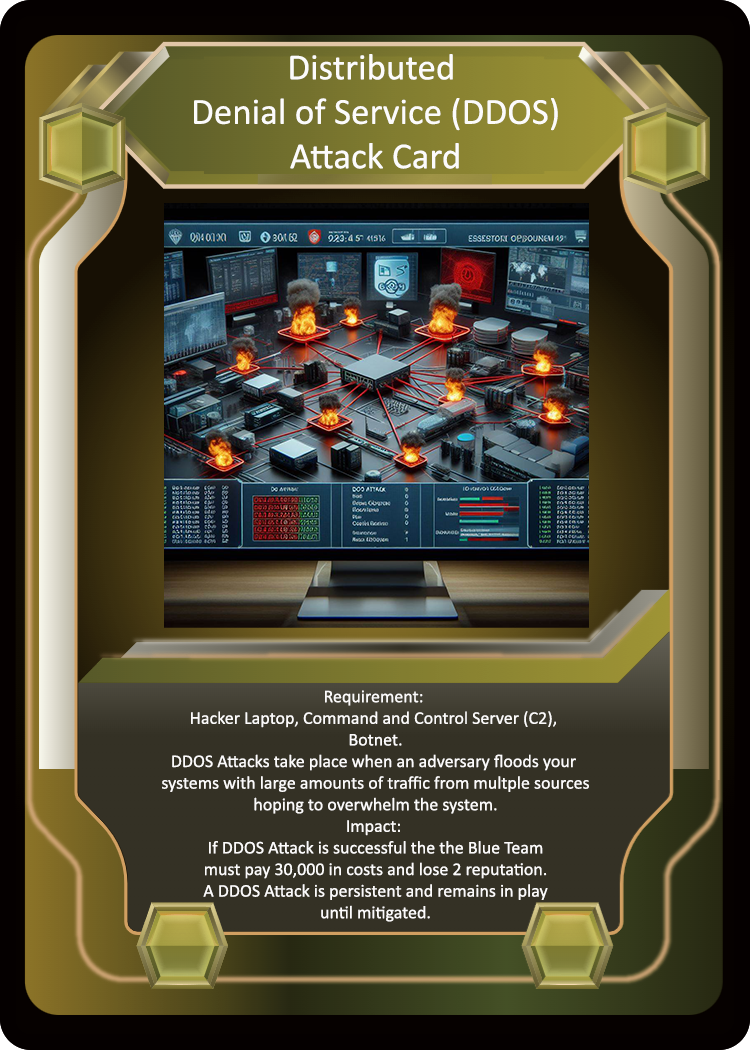
<style>
.page{position:relative;width:750px;height:1050px}
.page>*{position:absolute;margin:0}
.t1{font:37px "Calibri";color:#fcfbfb}
.t2{font:18px "Calibri";color:#fcfbfb}
</style>
<div class="page">
<p class="t1" style="left:194px;top:54px;width:364px;height:115px;text-align:center">Distributed <br>Denial of Service (DDOS)<br>Attack Card</p>
<p class="t2" style="left:162px;top:690px;width:427px;height:232px;text-align:center">Requirement: <br>Hacker Laptop, Command and Control Server (C2), <br>Botnet.<br>DDOS Attacks take place when an adversary floods your <br>systems with large amounts of traffic from multple sources<br>hoping to overwhelm the system.<br>Impact: <br>If DDOS Attack is successful the the Blue Team<br>must pay 30,000 in costs and lose 2 reputation.<br>A DDOS Attack is persistent and remains in play<br>until mitigated.</p>
</div>
